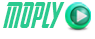
<style>
.page{position:relative;width:95px;height:39px;background:#ffffff}
.page>*{position:absolute;margin:0}
.t1{font:25.2px "AvengeanceHeroicAvengerNormal";color:#2aca90;scale:0.83 1}
</style>
<div class="page">
<p class="t1" style="left:3px;top:2px;width:62px;height:26px">MOPLY</p>
</div>
